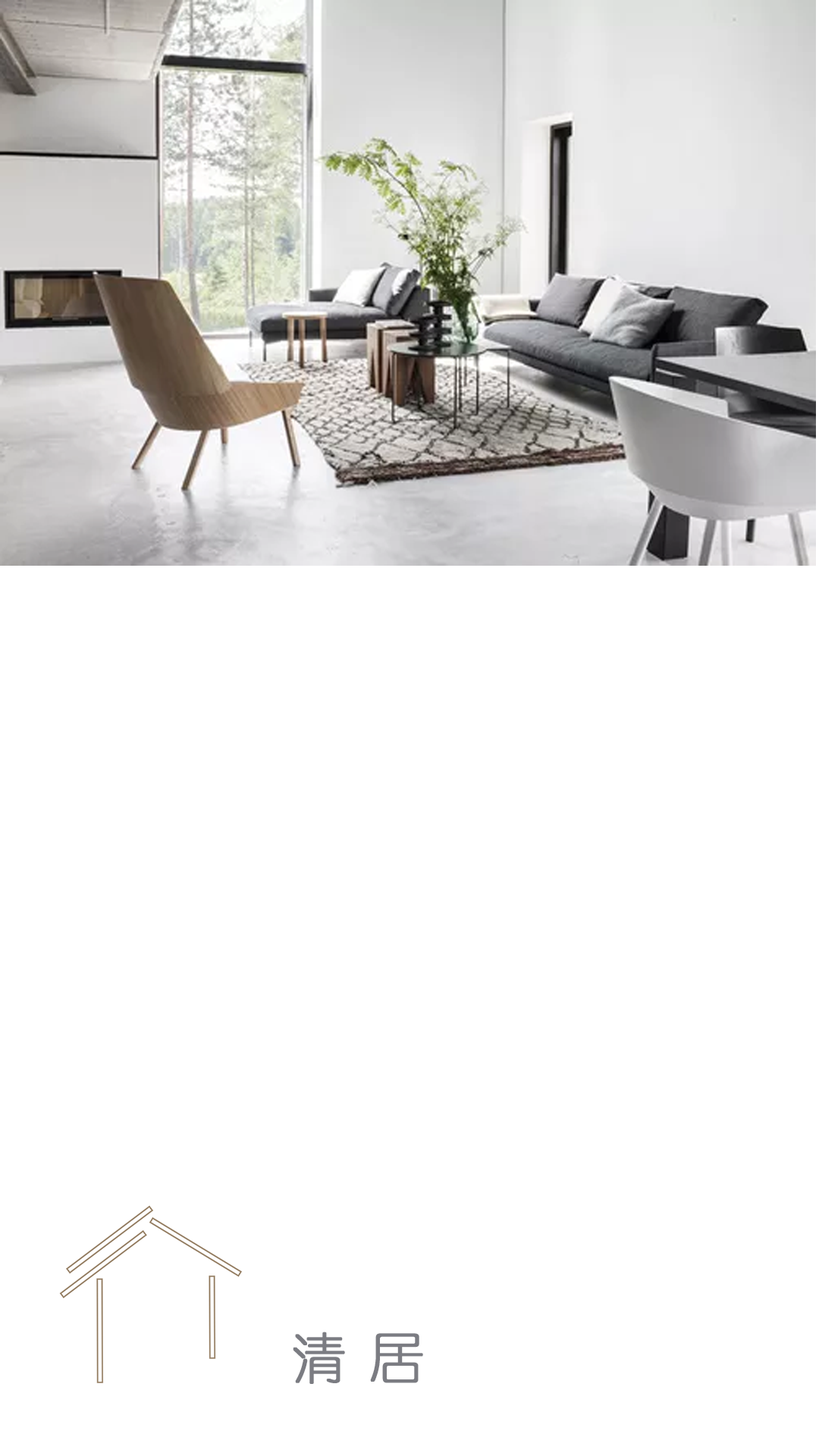
<style>
.page{position:relative;width:819px;height:1456px;background:#ffffff}
.page>*{position:absolute;margin:0}
.t1{font:54.6px "YouYuan";color:#7b7c82;font-weight:bold}
</style>
<div class="page">
<p class="t1" style="left:293px;top:1332px;width:52px;height:52px">清</p>
<p class="t1" style="left:370px;top:1333px;width:53px;height:50px">居</p>
</div>
